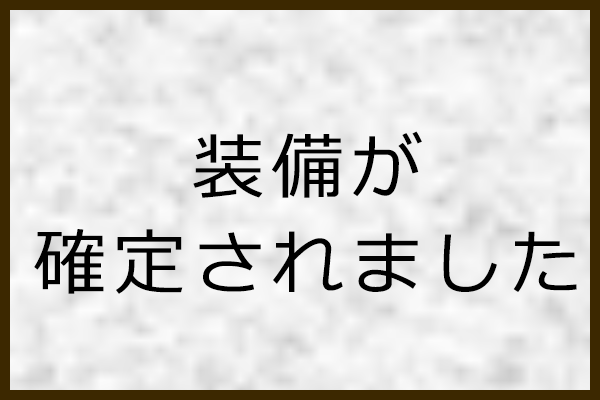
<style>
.page{position:relative;width:600px;height:400px}
.page>*{position:absolute;margin:0}
.t1{font:72px/12px "Meiryo";letter-spacing:0.1em;color:#000000}
</style>
<div class="page">
<p class="t1" style="left:34px;top:131px;width:543px;height:163px">装備が<br><br><br><br><br><br><br><br>確定されました</p>
</div>
